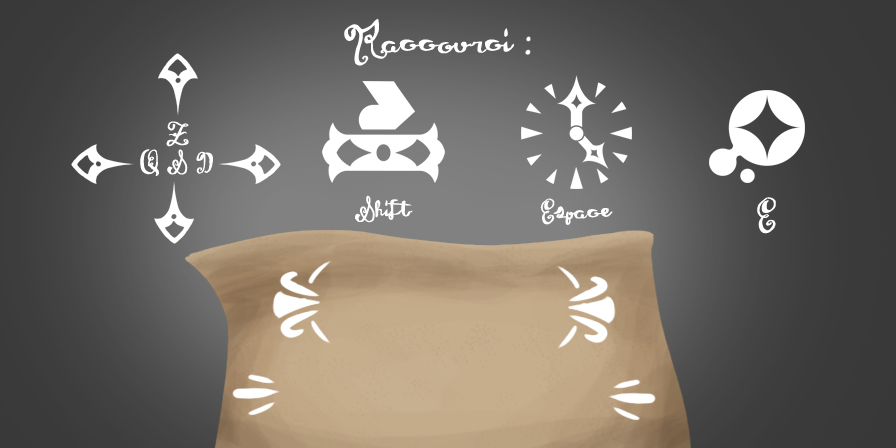
<style>
.page{position:relative;width:896px;height:448px}
.page>*{position:absolute;margin:0}
.t1{font:33.2px "WineTasting";color:#ffffff}
.t2{font:32.3px "WineTasting";color:#ffffff}
.t3{font:34px "WineTasting";color:#ffffff;scale:0.93 1}
.t4{font:35.8px "WineTasting";color:#ffffff}
.t5{font:50px "WineTasting";color:#ffffff}
</style>
<div class="page">
<p class="t1" style="left:166px;top:121px;width:23px;height:26px">Z</p>
<p class="t2" style="left:140px;top:149px;width:73px;height:27px">Q S D</p>
<p class="t3" style="left:355px;top:195px;width:58px;height:28px">Shift</p>
<p class="t4" style="left:540px;top:198px;width:73px;height:27px">Espace</p>
<p class="t5" style="left:757px;top:197px;width:19px;height:37px">E</p>
</div>
